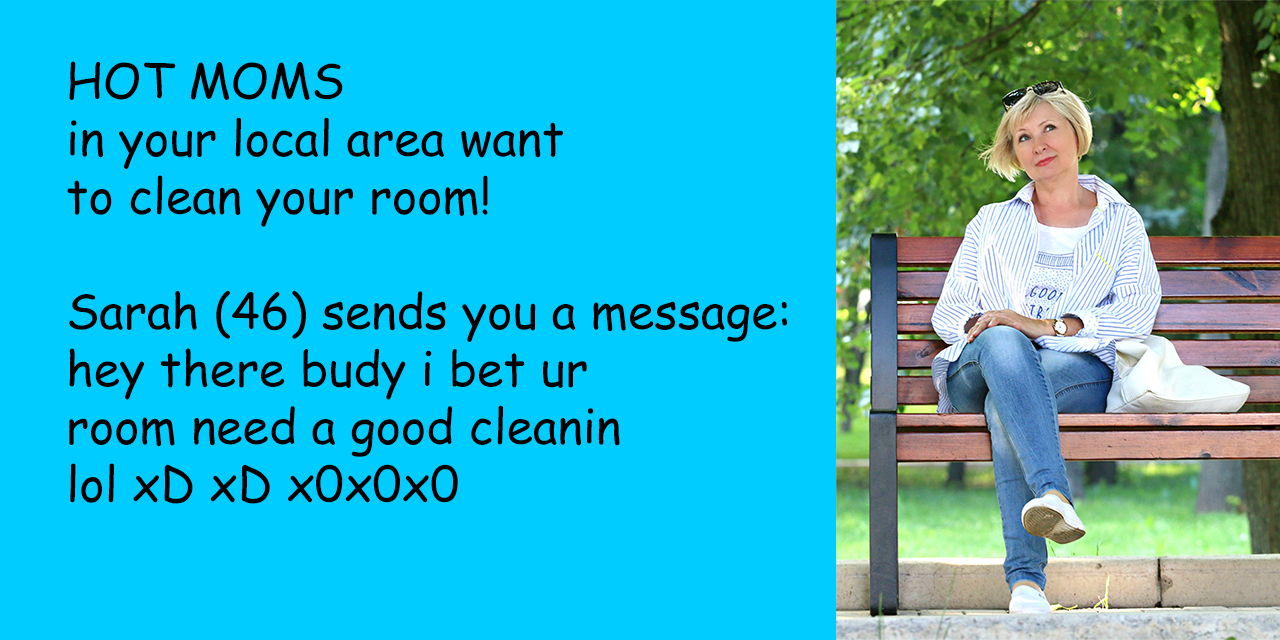
<style>
.page{position:relative;width:1280px;height:640px;background:#00ccff}
.page>*{position:absolute;margin:0}
.t1{font:48px "ComicSansMS";color:#000000}
</style>
<div class="page">
<p class="t1" style="left:67px;top:61px;width:720px;height:443px">HOT MOMS<br>in your local area want<br>to clean your room!<br><br>Sarah (46) sends you a message:<br>hey there budy i bet ur<br>room need a good cleanin<br>lol xD xD x0x0x0</p>
</div>
